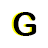
<style>
.page{position:relative;width:48px;height:48px;background:#ffffff}
.page>*{position:absolute;margin:0}
.t1{font:33.3px "ArialRoundedMTBold"}
.t2{font:33.3px "ArialRoundedMTBold";color:#000000}
</style>
<div class="page">
<p class="t1" style="left:11px;top:12px;width:24px;height:24px">G</p>
<p class="t2" style="left:13px;top:12px;width:24px;height:24px">G</p>
</div>
